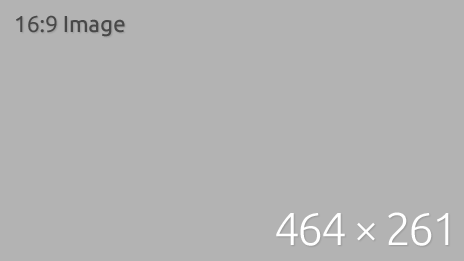
<style>
.page{position:relative;width:464px;height:261px;background:#b3b3b3}
.page>*{position:absolute;margin:0}
.t1{font:23px "Ubuntu";letter-spacing:-0.01em;color:#484848}
.t2{font:46px "Ubuntu-Light";letter-spacing:-0.05em;color:#ffffff}
</style>
<div class="page">
<p class="t1" style="left:16px;top:15px;width:109px;height:22px">16:9 Image</p>
<p class="t2" style="left:276px;top:212px;width:173px;height:34px">464 × 261</p>
</div>
